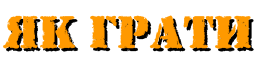
<style>
.page{position:relative;width:256px;height:64px;background:#ffffff}
.page>*{position:absolute;margin:0}
.t1{font:44.5px "AStamperRgBt";letter-spacing:0.01em;color:#ff9900}
.t2{font:44.5px "AStamperRgBt";letter-spacing:0.01em}
</style>
<div class="page">
<p class="t1" style="left:3px;top:15px;width:248px;height:34px">ЯК ГРАТИ</p>
<p class="t2" style="left:6px;top:18px;width:248px;height:34px">ЯК ГРАТИ</p>
</div>
